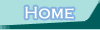
<style>
.page{position:relative;width:100px;height:30px;background:#abe0df}
.page>*{position:absolute;margin:0}
.t1{font:16.7px "CopperplateGothic-Light";letter-spacing:-0.01em;color:#ffffff;font-weight:bold}
</style>
<div class="page">
<p class="t1" style="left:25px;top:6px;width:49px;height:13px">Home</p>
</div>
